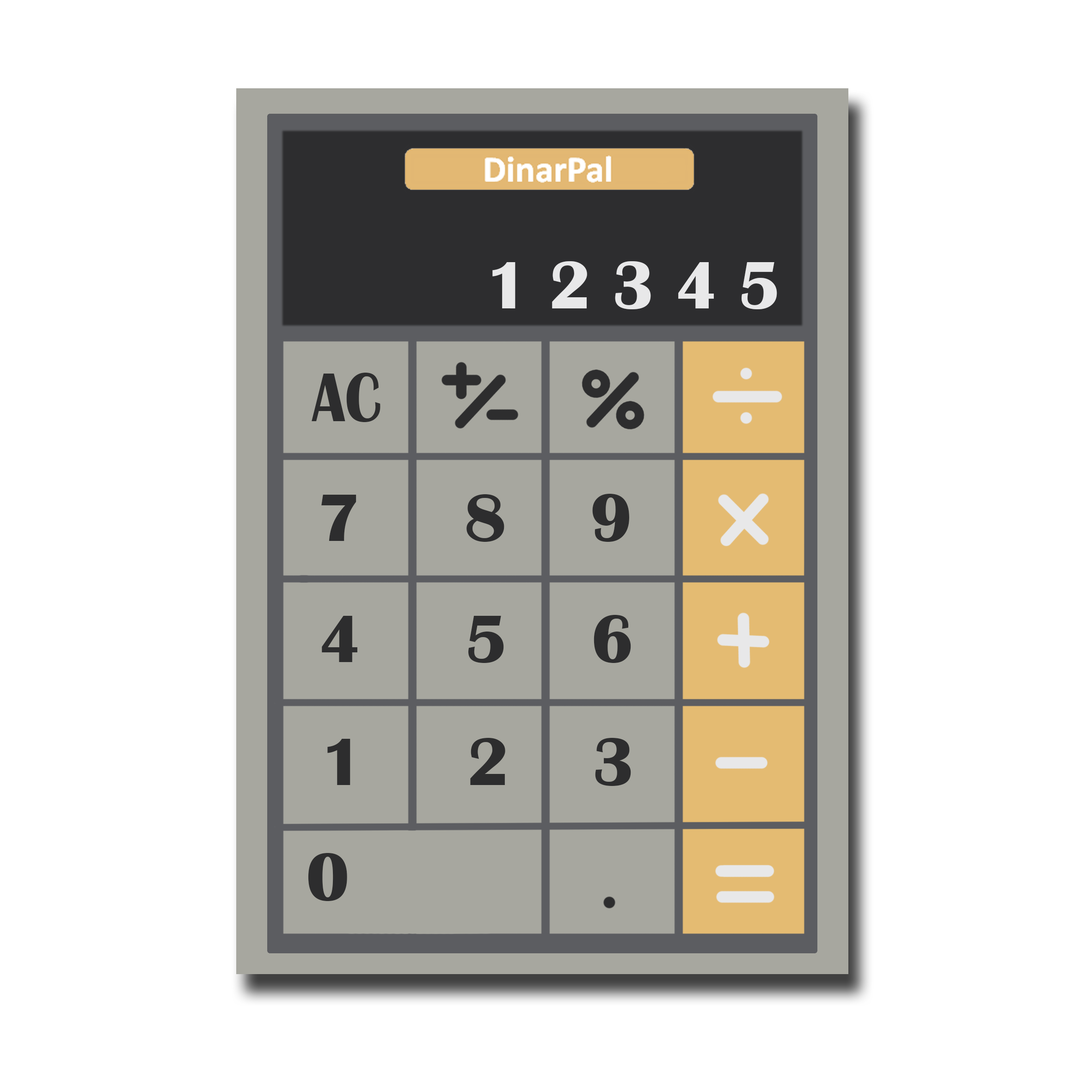
<style>
.page{position:relative;width:1092px;height:1092px;background:#ffffff}
.page>*{position:absolute;margin:0}
.t1{font:69.3px "BritannicBold";color:#e8e8e9}
.t2{font:71.7px "BritannicBold";color:#2d2d2e;scale:0.84 1}
.t3{font:69.3px "BritannicBold";color:#2d2d2e}
.t4{font:69.6px "BritannicBold";color:#2d2d2e}
</style>
<div class="page">
<p class="t1" style="left:492px;top:261px;width:285px;height:48px">1 2 3 4 5</p>
<p class="t2" style="left:312px;top:373px;width:68px;height:49px">AC</p>
<p class="t3" style="left:321px;top:494px;width:308px;height:48px">7     8    9</p>
<p class="t3" style="left:322px;top:615px;width:309px;height:48px">4     5    6</p>
<p class="t4" style="left:327px;top:738px;width:304px;height:48px">1     2    3</p>
<p class="t3" style="left:308px;top:853px;width:39px;height:48px">0</p>
</div>
